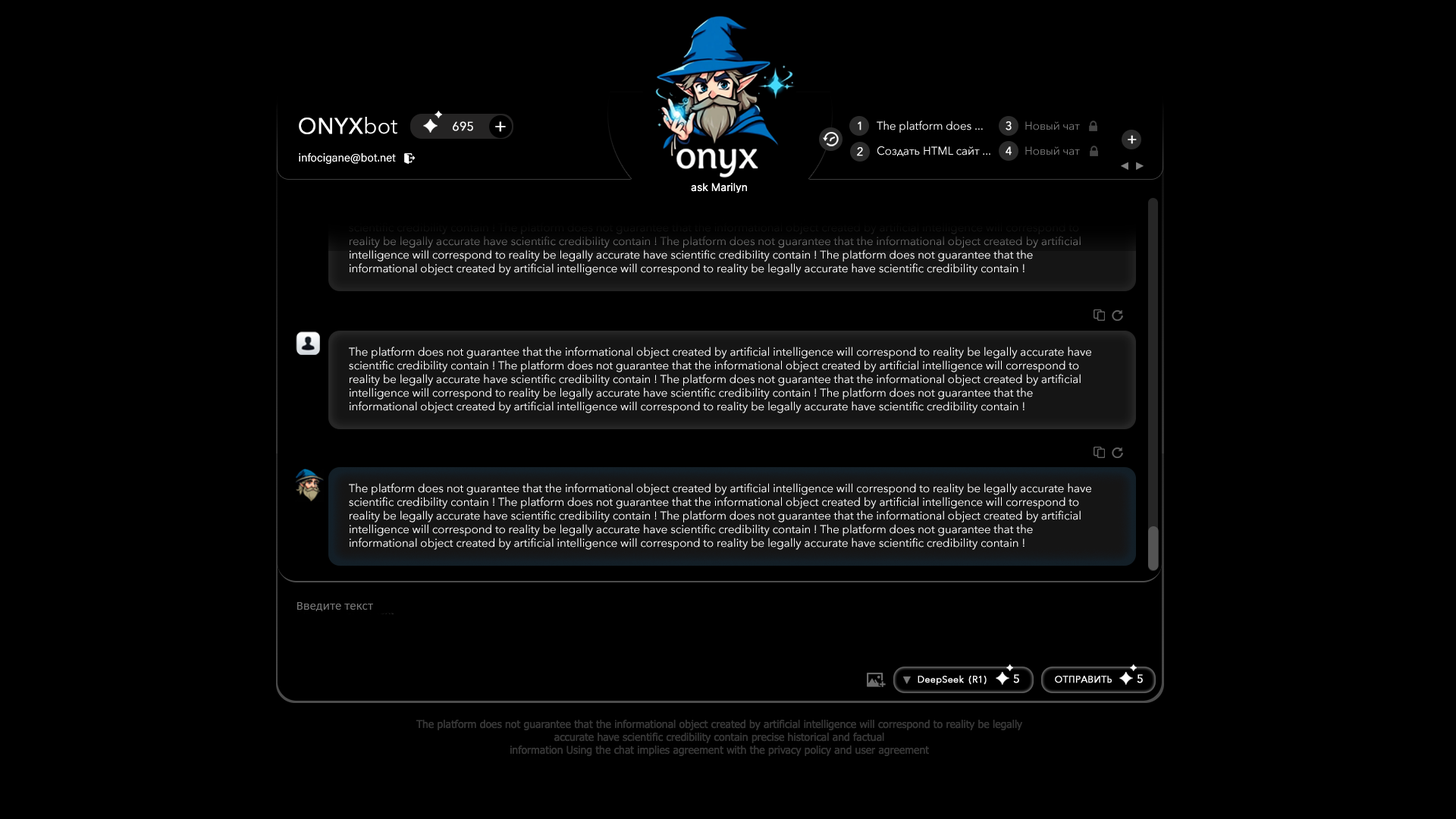
<style>
.page{position:relative;width:1456px;height:819px;background:#000000}
.page>*{position:absolute;margin:0}
.t1{font:22px "AvenirNext-Regular";color:#ffffff;font-weight:bold}
.t2{font:22px "AvenirNext-Regular";color:#ffffff}
.t3{font:12.1px "AvenirNext-Regular";color:#ffffff;font-weight:bold}
.t4{font:18.2px "AvenirNext-Regular";color:#ffffff;font-weight:bold}
.t5{font:11.4px "AvenirNext-Regular";color:#ffffff;font-weight:bold}
.t6{font:11.4px "AvenirNext-Regular";color:#ffffff}
.t7{font:11.4px "AvenirNext-Regular";color:#7c7c7c}
.t8{font:15.5px "AvenirNext-Regular";color:#ffffff;font-weight:bold}
.t9{font:11.4px "AcuminConcept-Regular";color:#ffffff;font-weight:bold}
.t10{font:11.4px "AvenirNext-Regular"}
.t11{font:11.4px "ArtifaktElement-Regular";color:#787878}
.t12{font:9.3px "AvenirNext-Regular";color:#ffffff;font-weight:bold}
.t13{font:11.2px "AvenirNext-Regular";color:#ffffff;font-weight:bold}
.t14{font:9.3px "AvenirNext-Regular";color:#ffffff;text-transform:uppercase;font-weight:bold}
</style>
<div class="page">
<p class="t1" style="left:299px;top:117px;width:98px;height:17px">ONYX<span class="t2">bot</span></p>
<p class="t3" style="left:453px;top:121px;width:20px;height:10px">695</p>
<p class="t4" style="left:495px;top:121px;width:11px;height:11px">+</p>
<p class="t5" style="left:858px;top:121px;width:3px;height:9px">1</p>
<p class="t6" style="left:877px;top:121px;width:106px;height:12px">The platform does ...</p>
<p class="t5" style="left:1006px;top:121px;width:6px;height:9px">3</p>
<p class="t7" style="left:1025px;top:121px;width:55px;height:9px">Новый чат</p>
<p class="t8" style="left:1128px;top:135px;width:9px;height:9px">+</p>
<p class="t5" style="left:857px;top:147px;width:6px;height:9px">2</p>
<p class="t6" style="left:877px;top:146px;width:113px;height:10px">Создать HTML сайт ...</p>
<p class="t5" style="left:1006px;top:146px;width:6px;height:9px">4</p>
<p class="t7" style="left:1025px;top:146px;width:55px;height:9px">Новый чат</p>
<p class="t9" style="left:299px;top:152px;width:97px;height:13px">infocigane@bot.net</p>
<p class="t10" style="left:349px;top:209px;width:742px;height:66px">The platform does not guarantee that the informational object created by artificial intelligence will correspond to reality be legally accurate have <br>scientific credibility contain ! The platform does not guarantee that the informational object created by artificial intelligence will correspond to <br>reality be legally accurate have scientific credibility contain ! The platform does not guarantee that the informational object created by artificial <br>intelligence will correspond to reality be legally accurate have scientific credibility contain ! The platform does not guarantee that the <br>informational object created by artificial intelligence will correspond to reality be legally accurate have scientific credibility contain !</p>
<p class="t6" style="left:349px;top:347px;width:742px;height:66px">The platform does not guarantee that the informational object created by artificial intelligence will correspond to reality be legally accurate have <br>scientific credibility contain ! The platform does not guarantee that the informational object created by artificial intelligence will correspond to <br>reality be legally accurate have scientific credibility contain ! The platform does not guarantee that the informational object created by artificial <br>intelligence will correspond to reality be legally accurate have scientific credibility contain ! The platform does not guarantee that the <br>informational object created by artificial intelligence will correspond to reality be legally accurate have scientific credibility contain !</p>
<p class="t6" style="left:349px;top:483px;width:742px;height:67px">The platform does not guarantee that the informational object created by artificial intelligence will correspond to reality be legally accurate have <br>scientific credibility contain ! The platform does not guarantee that the informational object created by artificial intelligence will correspond to <br>reality be legally accurate have scientific credibility contain ! The platform does not guarantee that the informational object created by artificial <br>intelligence will correspond to reality be legally accurate have scientific credibility contain ! The platform does not guarantee that the <br>informational object created by artificial intelligence will correspond to reality be legally accurate have scientific credibility contain !</p>
<p class="t11" style="left:297px;top:602px;width:76px;height:9px">Введите текст</p>
<p class="t12" style="left:918px;top:675px;width:69px;height:10px">DeepSeek  (R1)</p>
<p class="t13" style="left:1013px;top:674px;width:6px;height:9px">5</p>
<p class="t14" style="left:1055px;top:676px;width:57px;height:7px">Отправить</p>
<p class="t13" style="left:1137px;top:674px;width:6px;height:9px">5</p>
</div>
